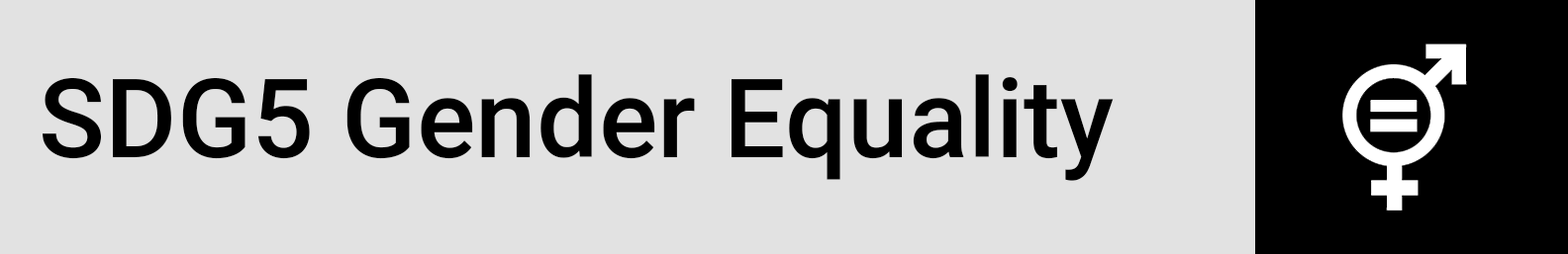
<style>
.page{position:relative;width:1568px;height:254px;background:#e2e2e2}
.page>*{position:absolute;margin:0}
.t1{font:109.9px "Roboto-Medium";color:#000000}
</style>
<div class="page">
<p class="t1" style="left:43px;top:74px;width:1071px;height:107px">SDG5 Gender Equality</p>
</div>
